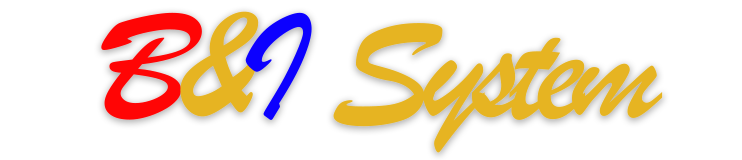
<style>
.page{position:relative;width:742px;height:160px;background:#ffffff}
.page>*{position:absolute;margin:0}
.t1{font:160px "BrushScriptMT";letter-spacing:-0.075em;color:#e6b422}
.t2{font:160px "BrushScriptMT";letter-spacing:-0.075em;color:#ff0505}
.t3{font:160px "BrushScriptMT";letter-spacing:-0.075em;color:#0c00ff}
</style>
<div class="page">
<p class="t1" style="left:101px;top:11px;width:562px;height:142px"><span class="t2">B</span>&amp;<span class="t3">I </span>System</p>
</div>
